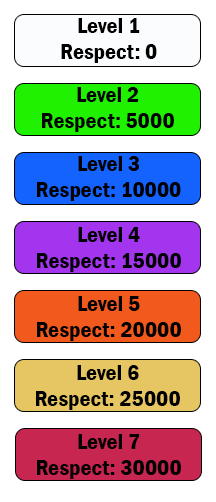
<style>
.page{position:relative;width:216px;height:502px;background:#ffffff}
.page>*{position:absolute;margin:0}
.t1{font:22.3px "FranklinGothic-DemiCond";color:#000000;scale:1.08 1}
</style>
<div class="page">
<p class="t1" style="left:61px;top:18px;width:96px;height:45px;text-align:center">Level 1<br>Respect: 0</p>
<p class="t1" style="left:42px;top:87px;width:132px;height:45px;text-align:center">Level 2<br>Respect: 5000</p>
<p class="t1" style="left:37px;top:156px;width:144px;height:45px;text-align:center">Level 3<br>Respect: 10000</p>
<p class="t1" style="left:37px;top:227px;width:144px;height:45px;text-align:center">Level 4<br>Respect: 15000</p>
<p class="t1" style="left:37px;top:296px;width:144px;height:45px;text-align:center">Level 5<br>Respect: 20000</p>
<p class="t1" style="left:36px;top:365px;width:144px;height:45px;text-align:center">Level 6<br>Respect: 25000</p>
<p class="t1" style="left:37px;top:434px;width:144px;height:45px;text-align:center">Level 7<br>Respect: 30000</p>
</div>
